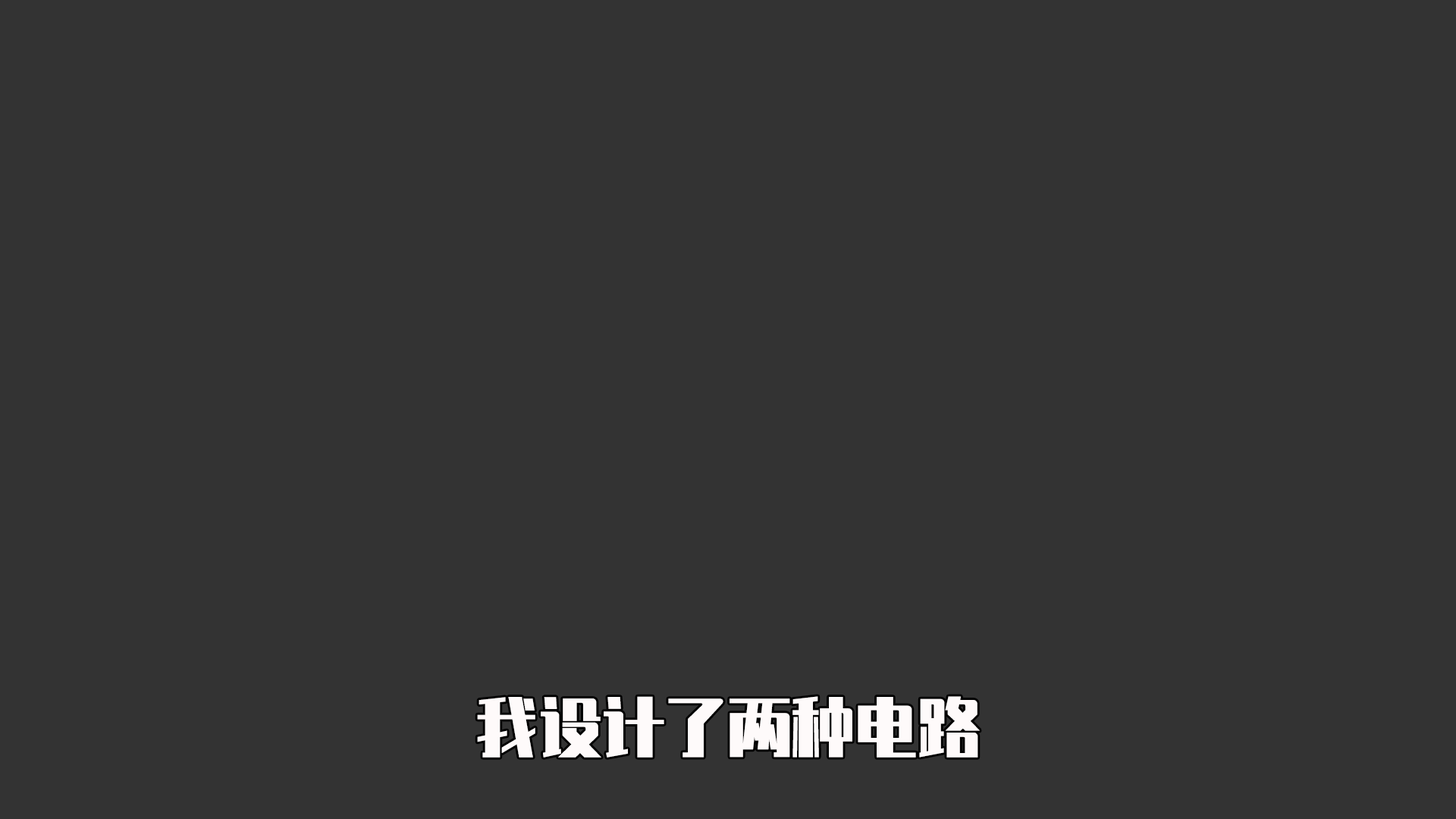
<style>
.page{position:relative;width:1456px;height:819px;background:#333333}
.page>*{position:absolute;margin:0}
.t1{font:63.2px "ZhenyanGB-Regular";color:#fefafa}
</style>
<div class="page">
<p class="t1" style="left:477px;top:696px;width:503px;height:62px">我设计了两种电路</p>
</div>
